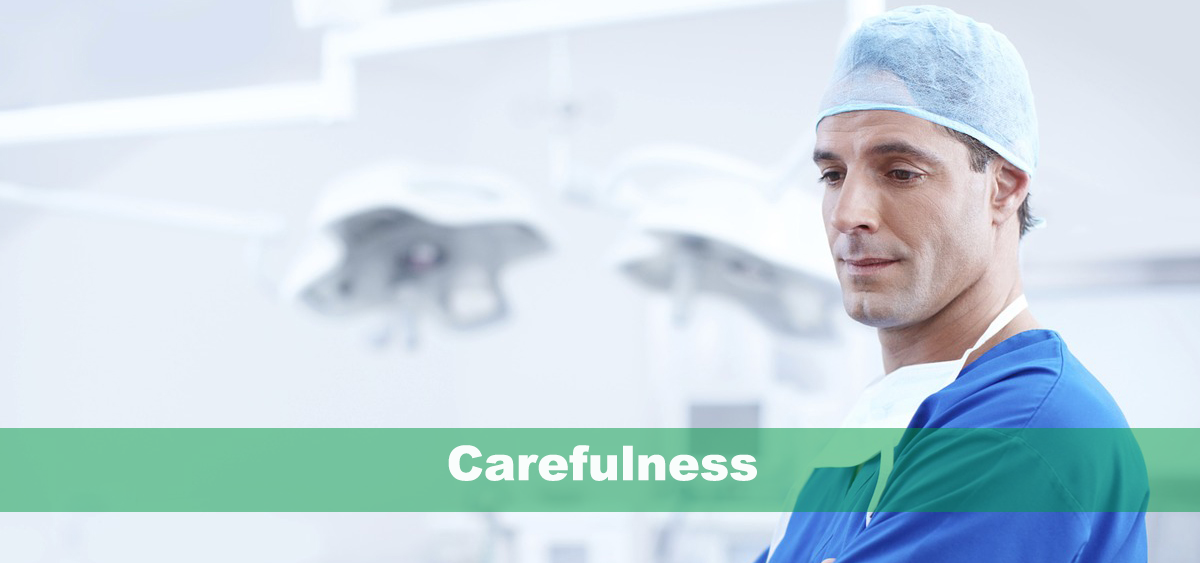
<style>
.page{position:relative;width:1200px;height:563px}
.page>*{position:absolute;margin:0}
.t1{font:48px "Arial-Black";color:#f9fdfc}
</style>
<div class="page">
<p class="t1" style="left:448px;top:445px;width:309px;height:36px">Carefulness</p>
</div>
